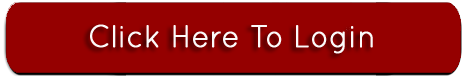
<style>
.page{position:relative;width:464px;height:78px;background:#950000}
.page>*{position:absolute;margin:0}
.t1{font:32.1px "Quicksand-Regular";letter-spacing:-0.005em;color:#fbfafa;font-weight:bold;scale:0.91 1}
</style>
<div class="page">
<p class="t1" style="left:90px;top:24px;width:283px;height:30px">Click Here To Login</p>
</div>
